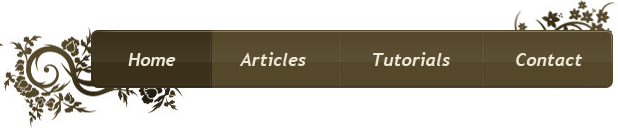
<style>
.page{position:relative;width:618px;height:128px;background:#ffffff}
.page>*{position:absolute;margin:0}
.t1{font:18px "Trebuchet-BoldItalic";color:#ece8d7}
</style>
<div class="page">
<p class="t1" style="left:128px;top:52px;width:454px;height:14px">Home            Articles            Tutorials            Contact</p>
</div>
